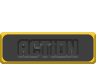
<style>
.page{position:relative;width:96px;height:64px;background:#ffffff}
.page>*{position:absolute;margin:0}
.t1{font:21.5px "AldotheApache";letter-spacing:0.025em;color:#414140}
</style>
<div class="page">
<p class="t1" style="left:19px;top:41px;width:58px;height:15px">Action</p>
</div>
